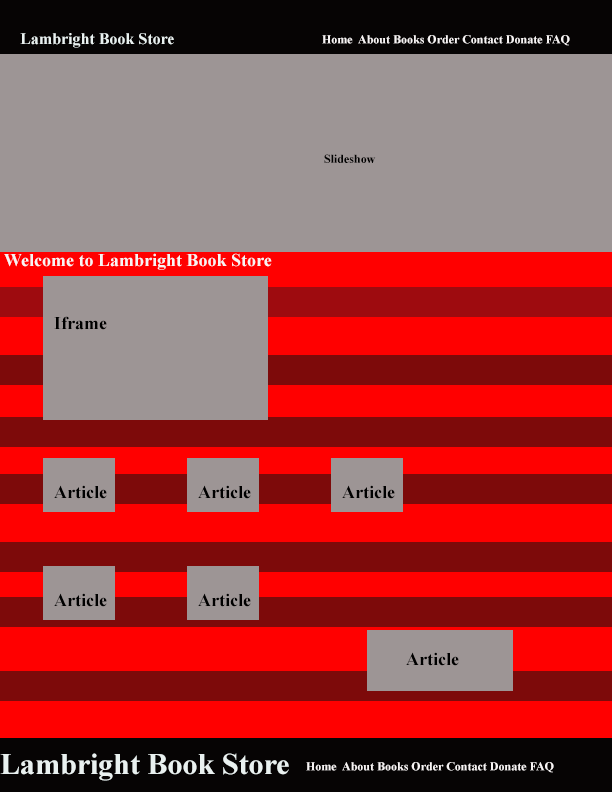
<style>
.page{position:relative;width:612px;height:792px;background:#9d9595}
.page>*{position:absolute;margin:0}
.t1{font:16px "TimesNewRomanPS-BoldMT";color:#e9f1f0}
.t2{font:12px "TimesNewRomanPS-BoldMT";color:#f7f4f4}
.t3{font:12px "TimesNewRomanPS-BoldMT";color:#000000}
.t4{font:18px "TimesNewRomanPS-BoldMT";color:#f7f4f4}
.t5{font:18px "TimesNewRomanPS-BoldMT";color:#000000}
.t6{font:30px "TimesNewRomanPS-BoldMT";color:#e9f1f0}
</style>
<div class="page">
<p class="t1" style="left:20px;top:33px;width:154px;height:15px">Lambright Book Store</p>
<p class="t2" style="left:322px;top:35px;width:248px;height:11px">Home  About Books Order Contact Donate FAQ</p>
<p class="t3" style="left:324px;top:154px;width:52px;height:9px">Slideshow</p>
<p class="t4" style="left:4px;top:253px;width:268px;height:17px">Welcome to Lambright Book Store</p>
<p class="t5" style="left:54px;top:316px;width:53px;height:14px">Iframe</p>
<p class="t5" style="left:54px;top:485px;width:53px;height:14px">Article</p>
<p class="t5" style="left:198px;top:485px;width:53px;height:14px">Article</p>
<p class="t5" style="left:342px;top:485px;width:53px;height:14px">Article</p>
<p class="t5" style="left:54px;top:593px;width:53px;height:14px">Article</p>
<p class="t5" style="left:198px;top:593px;width:53px;height:14px">Article</p>
<p class="t5" style="left:406px;top:652px;width:53px;height:14px">Article</p>
<p class="t6" style="left:0px;top:753px;width:289px;height:28px">Lambright Book Store</p>
<p class="t2" style="left:306px;top:762px;width:248px;height:11px">Home  About Books Order Contact Donate FAQ</p>
</div>
